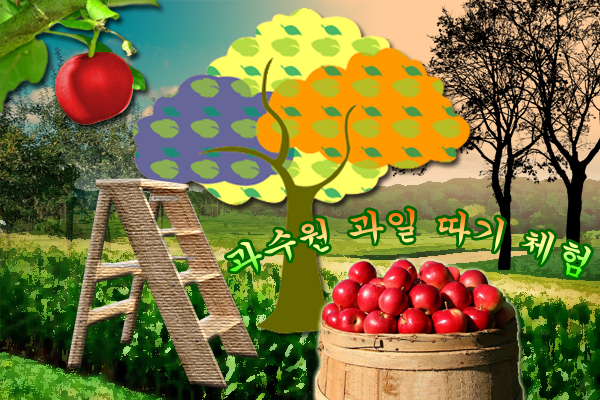
<style>
.page{position:relative;width:600px;height:400px}
.page>*{position:absolute;margin:0}
.t1{font:35.1px "Gungsuh"}
</style>
<div class="page">
<p class="t1" style="left:226px;top:208px;width:365px;height:70px">과수원 과일 따기 체험</p>
</div>
